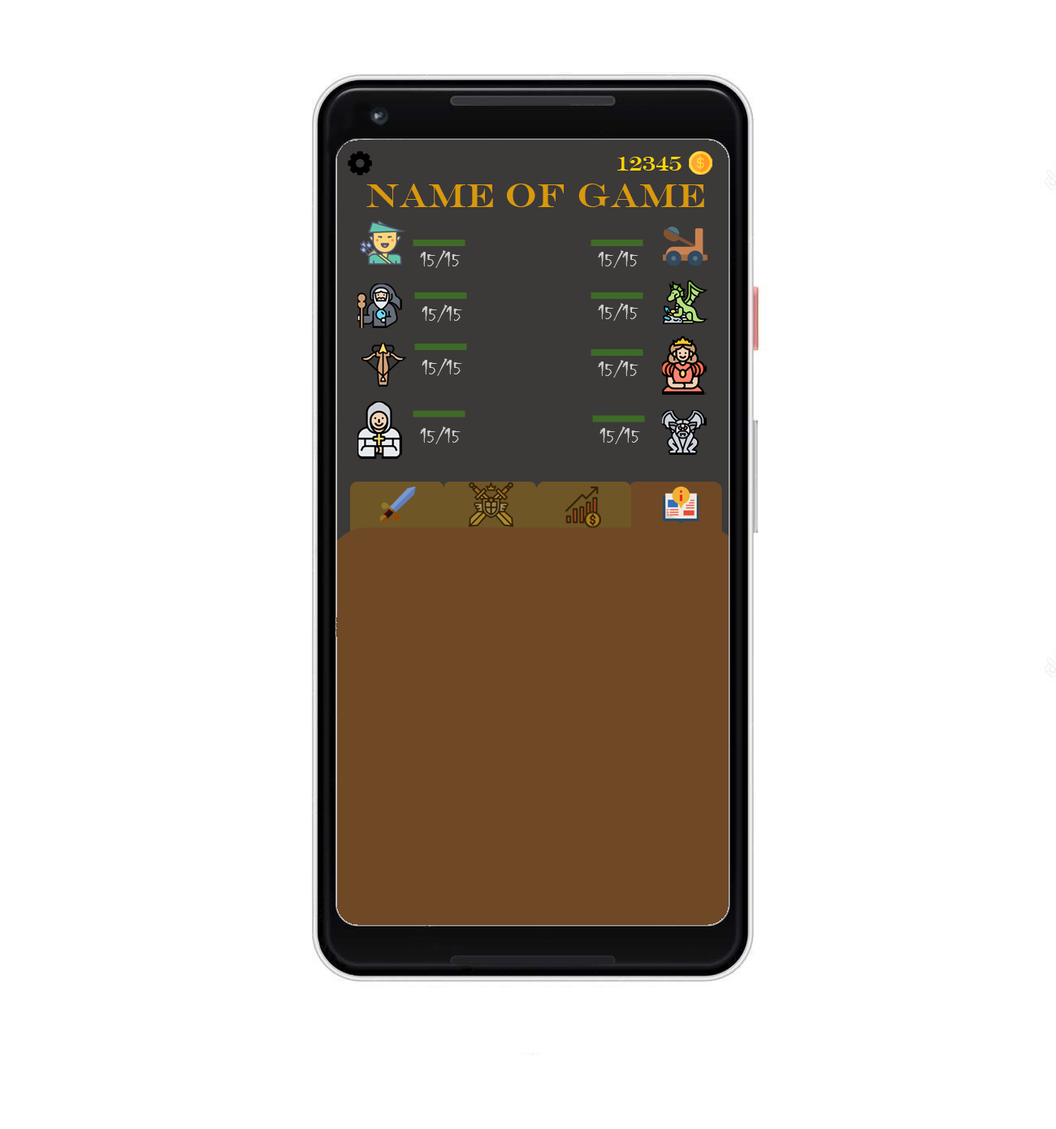
<style>
.page{position:relative;width:1056px;height:1129px;background:#ffffff}
.page>*{position:absolute;margin:0}
.t1{font:20.3px "EngraversMT";color:#ffd700}
.t2{font:33.8px "EngraversMT";color:#d9990b}
.t3{font:20.3px "Chiller-Regular";color:#d0d0d0}
</style>
<div class="page">
<p class="t1" style="left:617px;top:157px;width:65px;height:14px">12345</p>
<p class="t2" style="left:366px;top:184px;width:338px;height:23px">Name of Game</p>
<p class="t3" style="left:420px;top:250px;width:41px;height:18px">15/15</p>
<p class="t3" style="left:598px;top:250px;width:40px;height:18px">15/15</p>
<p class="t3" style="left:422px;top:305px;width:40px;height:17px">15/15</p>
<p class="t3" style="left:598px;top:303px;width:40px;height:18px">15/15</p>
<p class="t3" style="left:422px;top:358px;width:40px;height:18px">15/15</p>
<p class="t3" style="left:598px;top:360px;width:40px;height:18px">15/15</p>
<p class="t3" style="left:420px;top:426px;width:41px;height:18px">15/15</p>
<p class="t3" style="left:600px;top:426px;width:40px;height:18px">15/15</p>
</div>
